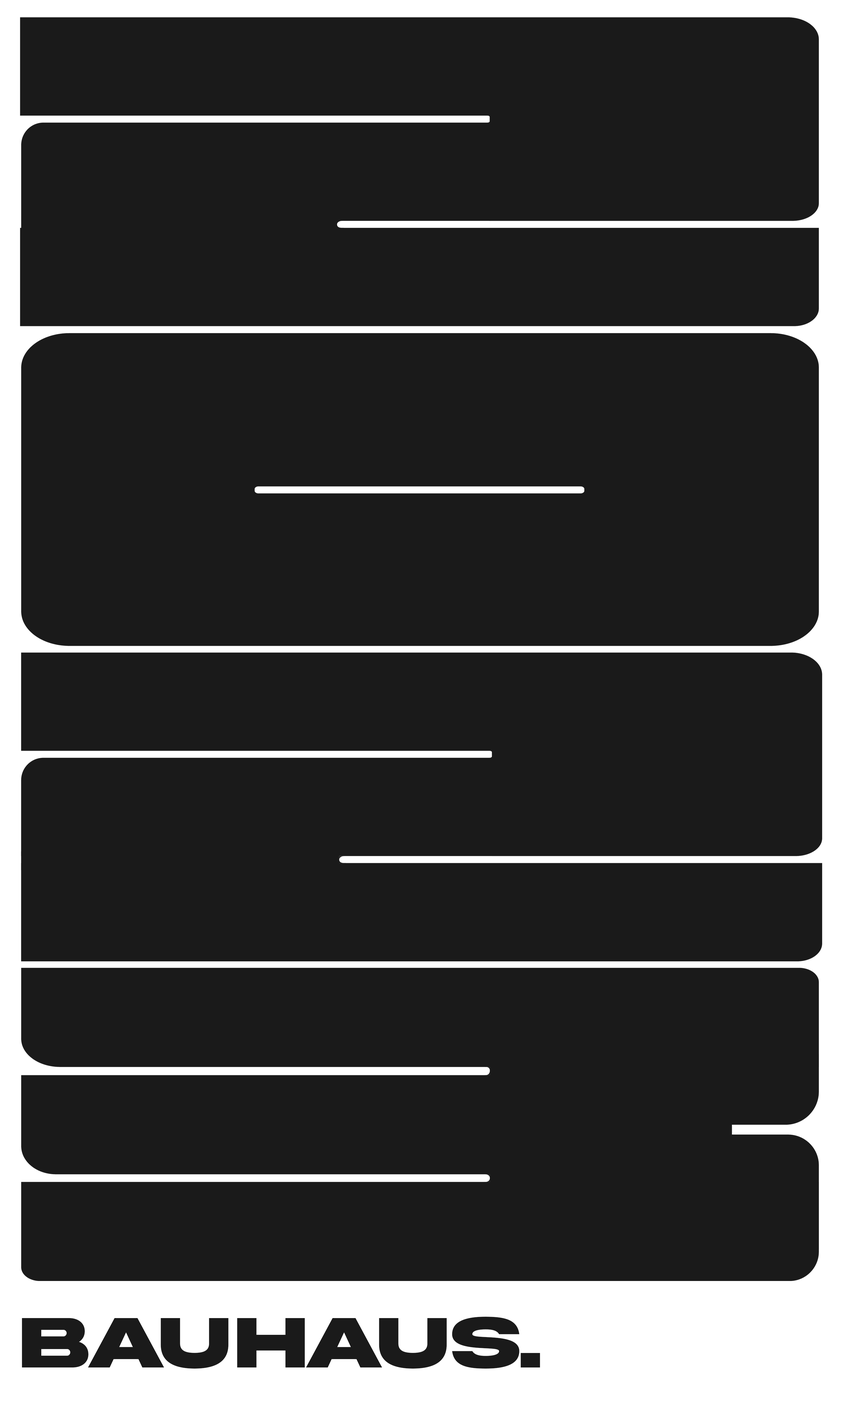
<style>
.page{position:relative;width:842px;height:1416px;background:#1a1a1a}
.page>*{position:absolute;margin:0}
.t1{font:75.4px "AkiraExpanded-SuperBold";color:#1a1a1a}
</style>
<div class="page">
<p class="t1" style="left:22px;top:1316px;width:518px;height:52px">BAUHAUS.</p>
</div>
